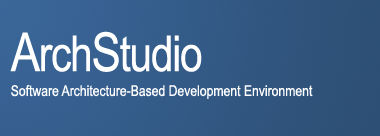
<style>
.page{position:relative;width:380px;height:136px}
.page>*{position:absolute;margin:0}
.t1{font:49.6px "ArialNarrow";letter-spacing:-0.025em;color:#ffffff}
.t2{font:53.8px "ArialNarrow";letter-spacing:-0.025em;color:#ffffff}
.t3{font:14.9px "ArialNarrow";color:#ffffff}
</style>
<div class="page">
<p class="t1" style="left:10px;top:31px;width:192px;height:41px"><span class="t2">A</span>rch<span class="t2">S</span>tudio</p>
<p class="t3" style="left:11px;top:85px;width:302px;height:14px">Software Architecture-Based Development Environment</p>
</div>
